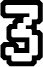
<style>
.page{position:relative;width:43px;height:67px;background:#000000}
.page>*{position:absolute;margin:0}
.t1{font:72px "Cubic_11";letter-spacing:0.1em;color:#ffffff;font-weight:bold}
</style>
<div class="page">
<p class="t1" style="left:5px;top:5px;width:33px;height:57px">3</p>
</div>
